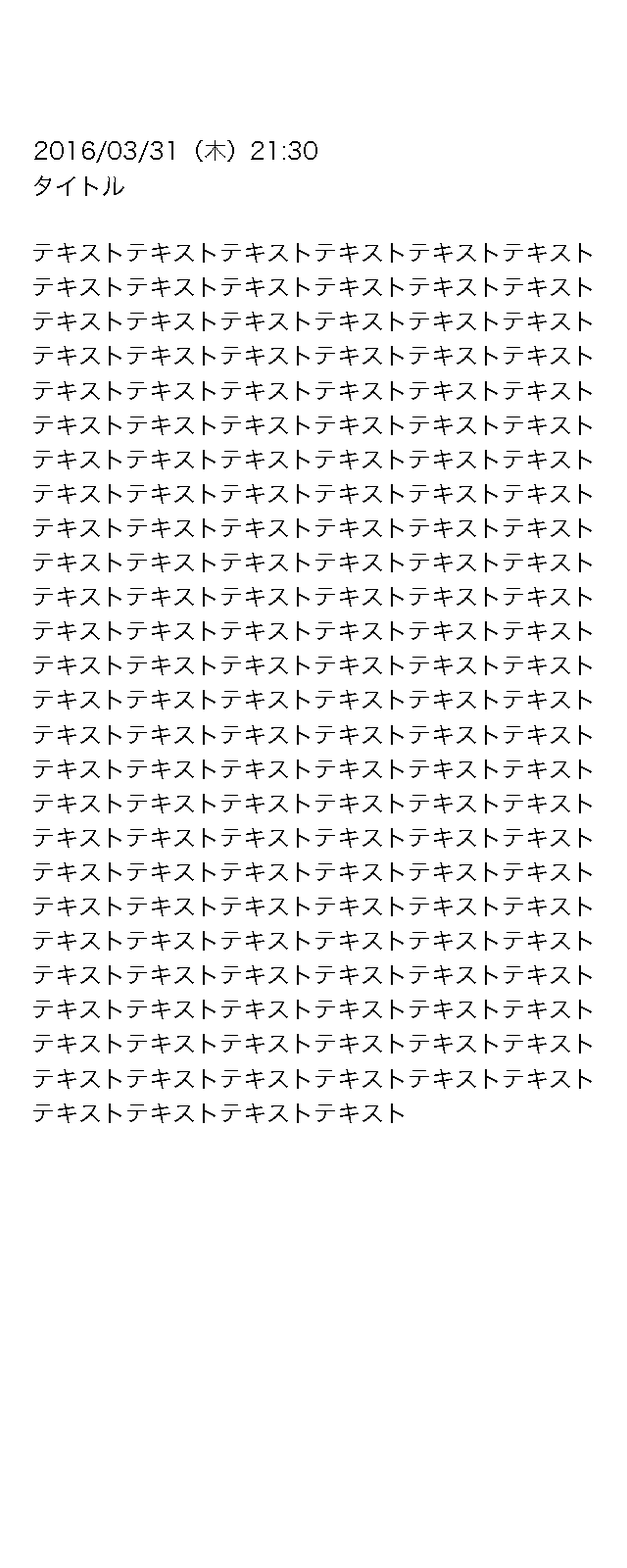
<style>
.page{position:relative;width:627px;height:1568px;background:#ffffff}
.page>*{position:absolute;margin:0}
.t1{font:23.5px "HiraKakuProN-W3";color:#000000}
.t2{font:23.5px/17.2px "HiraKakuProN-W3";color:#000000}
</style>
<div class="page">
<p class="t1" style="left:34px;top:140px;width:284px;height:23px">2016/03/31（木）21:30</p>
<p class="t1" style="left:34px;top:175px;width:90px;height:21px">タイトル</p>
<p class="t2" style="left:33px;top:243px;width:559px;height:880px">テキストテキストテキストテキストテキストテキスト<br><br>テキストテキストテキストテキストテキストテキスト<br><br>テキストテキストテキストテキストテキストテキスト<br><br>テキストテキストテキストテキストテキストテキスト<br><br>テキストテキストテキストテキストテキストテキスト<br><br>テキストテキストテキストテキストテキストテキスト<br><br>テキストテキストテキストテキストテキストテキスト<br><br>テキストテキストテキストテキストテキストテキスト<br><br>テキストテキストテキストテキストテキストテキスト<br><br>テキストテキストテキストテキストテキストテキスト<br><br>テキストテキストテキストテキストテキストテキスト<br><br>テキストテキストテキストテキストテキストテキスト<br><br>テキストテキストテキストテキストテキストテキスト<br><br>テキストテキストテキストテキストテキストテキスト<br><br>テキストテキストテキストテキストテキストテキスト<br><br>テキストテキストテキストテキストテキストテキスト<br><br>テキストテキストテキストテキストテキストテキスト<br><br>テキストテキストテキストテキストテキストテキスト<br><br>テキストテキストテキストテキストテキストテキスト<br><br>テキストテキストテキストテキストテキストテキスト<br><br>テキストテキストテキストテキストテキストテキスト<br><br>テキストテキストテキストテキストテキストテキスト<br><br>テキストテキストテキストテキストテキストテキスト<br><br>テキストテキストテキストテキストテキストテキスト<br><br>テキストテキストテキストテキストテキストテキスト<br><br>テキストテキストテキストテキスト</p>
</div>
